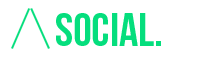
<style>
.page{position:relative;width:200px;height:60px;background:#ffffff}
.page>*{position:absolute;margin:0}
.t1{font:46.8px "BebasNeue";color:#05de7d}
</style>
<div class="page">
<p class="t1" style="left:56px;top:13px;width:105px;height:33px">SOcial.</p>
</div>
